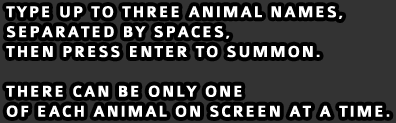
<style>
.page{position:relative;width:396px;height:123px;background:#333333}
.page>*{position:absolute;margin:0}
.t1{font:16.6px "Colaborate-Bold";letter-spacing:0.1em;color:#ffffff}
</style>
<div class="page">
<p class="t1" style="left:6px;top:6px;width:384px;height:111px">TYPE UP TO THREE ANIMAL NAMES,<br>SEPARATED BY SPACES,<br>THEN PRESS ENTER TO SUMMON.<br><br>THERE CAN BE ONLY ONE<br>OF EACH ANIMAL ON SCREEN AT A TIME.</p>
</div>
